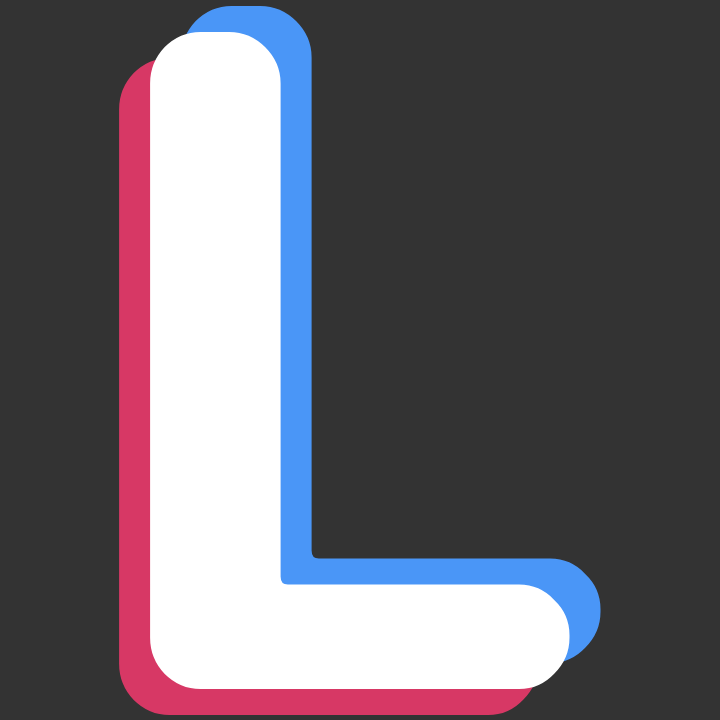
<style>
.page{position:relative;width:720px;height:720px;background:#333333}
.page>*{position:absolute;margin:0}
.t1{font:900px "RoundedMplus1c-Bold";color:#ffffff}
</style>
<div class="page">
<p class="t1" style="left:150px;top:32px;width:420px;height:657px">L</p>
</div>
